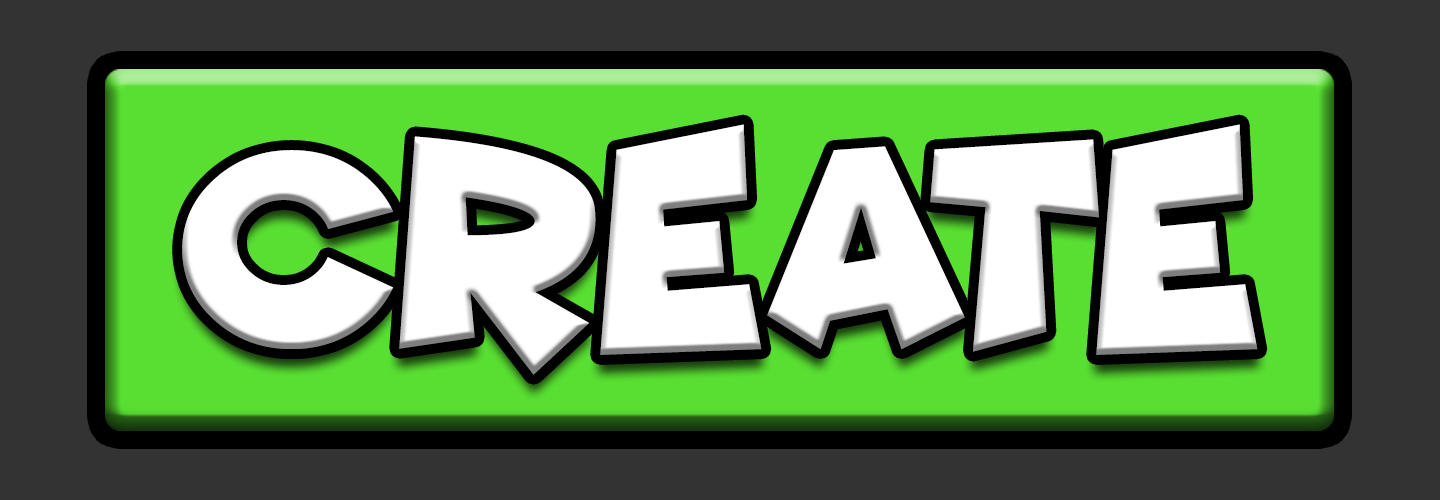
<style>
.page{position:relative;width:1440px;height:500px;background:#333333}
.page>*{position:absolute;margin:0}
.t1{font:290.6px "Funhouse";color:#ffffff;scale:0.95 1}
</style>
<div class="page">
<p class="t1" style="left:182px;top:124px;width:1076px;height:251px">CREATE</p>
</div>
